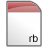
<style>
.page{position:relative;width:48px;height:48px;background:#ffffff}
.page>*{position:absolute;margin:0}
.t1{font:10.5px "ArialMT";color:#1b1b1b}
</style>
<div class="page">
<p class="t1" style="left:29px;top:34px;width:9px;height:8px">rb</p>
</div>
